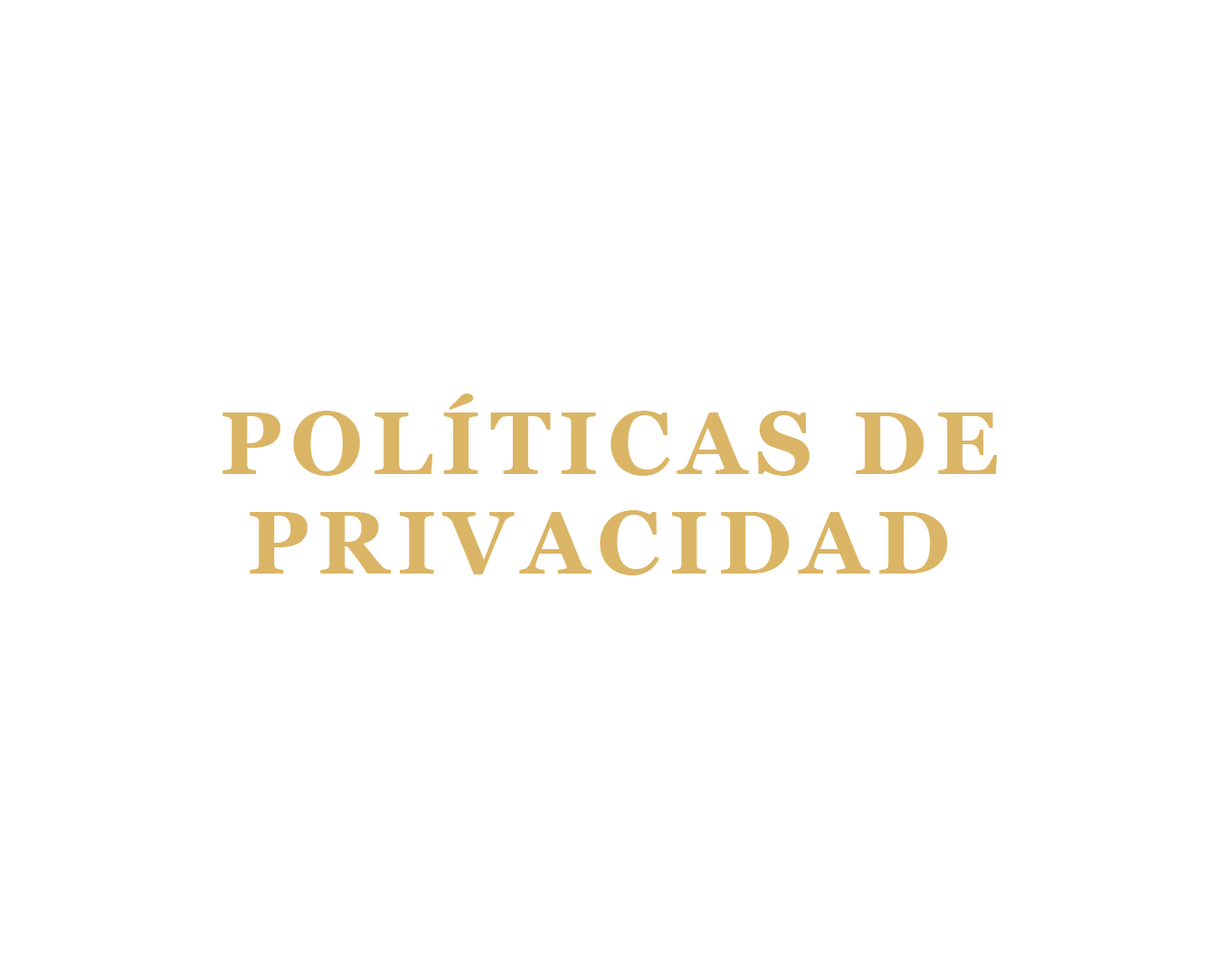
<style>
.page{position:relative;width:1221px;height:977px;background:#ffffff}
.page>*{position:absolute;margin:0}
.t1{font:88.4px/99.6px "Georgia-Bold";letter-spacing:0.1em;color:#dbb566;text-transform:uppercase}
</style>
<div class="page">
<p class="t1" style="left:222px;top:393px;width:776px;height:182px;text-align:center">POLÍTICAS DE<br>PRIVACIDAD</p>
</div>
